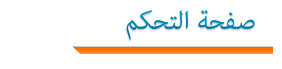
<style>
.page{position:relative;width:282px;height:69px;background:#ffffff}
.page>*{position:absolute;margin:0}
.t1{font:36px "AdobeArabic-Regular";color:#0081b4}
</style>
<div class="page">
<p class="t1" style="left:126px;top:10px;width:129px;height:31px">صفحة التحكم</p>
</div>
